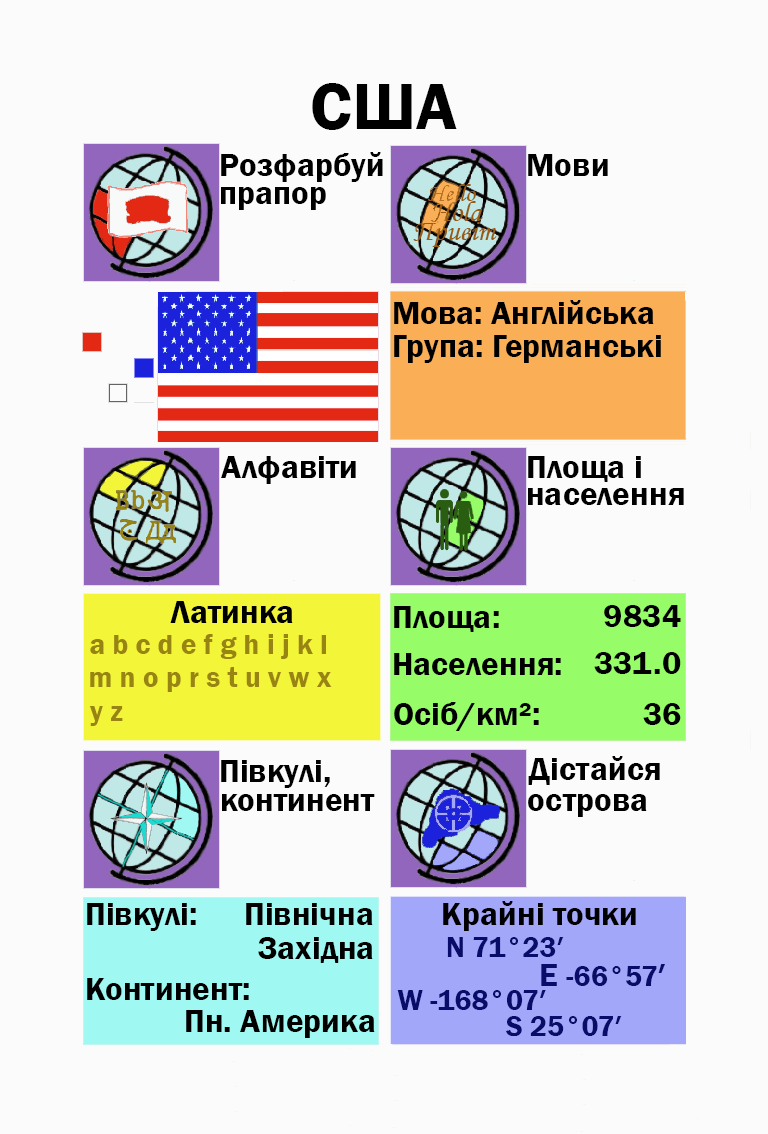
<style>
.page{position:relative;width:768px;height:1134px;background:#fbfbfb}
.page>*{position:absolute;margin:0}
.t1{font:66.7px "FranklinGothic-Demi";color:#000000}
.t2{font:33.3px "FranklinGothic-Demi";color:#000000}
.t3{font:33.3px "FranklinGothic-Demi";color:#000003}
.t4{font:29.2px "FranklinGothic-Demi";color:#988413}
.t5{font:29.2px "FranklinGothic-Demi";color:#090c69}
.t6{font:33.3px "FranklinGothic-Demi";color:#090c69}
</style>
<div class="page">
<p class="t1" style="left:312px;top:83px;width:145px;height:47px">США</p>
<p class="t2" style="left:221px;top:152px;width:162px;height:30px">Розфарбуй</p>
<p class="t2" style="left:528px;top:154px;width:80px;height:22px">Мови</p>
<p class="t2" style="left:221px;top:187px;width:105px;height:23px">прапор</p>
<p class="t2" style="left:394px;top:300px;width:260px;height:24px">Мова: Англійська</p>
<p class="t2" style="left:394px;top:335px;width:267px;height:28px">Група: Германські</p>
<p class="t2" style="left:221px;top:456px;width:135px;height:28px">Алфавіти</p>
<p class="t2" style="left:528px;top:456px;width:113px;height:26px">Площа і</p>
<p class="t2" style="left:528px;top:488px;width:156px;height:17px">населення</p>
<p class="t2" style="left:170px;top:601px;width:123px;height:22px">Латинка</p>
<p class="t2" style="left:394px;top:606px;width:105px;height:26px">Площа:</p>
<p class="t3" style="left:604px;top:605px;width:77px;height:22px">9834</p>
<p class="t4" style="left:90px;top:634px;width:236px;height:25px">a b c d e f g h i j k l</p>
<p class="t2" style="left:394px;top:653px;width:167px;height:22px">Населення:</p>
<p class="t2" style="left:594px;top:652px;width:87px;height:22px">331.0</p>
<p class="t4" style="left:90px;top:667px;width:242px;height:25px">m n o p r s t u v w x</p>
<p class="t2" style="left:394px;top:702px;width:145px;height:29px">Осіб/км²:</p>
<p class="t4" style="left:89px;top:706px;width:34px;height:20px">y z</p>
<p class="t2" style="left:643px;top:703px;width:38px;height:22px">36</p>
<p class="t2" style="left:221px;top:760px;width:109px;height:28px">Півкулі,</p>
<p class="t2" style="left:528px;top:756px;width:132px;height:29px">Дістайся</p>
<p class="t2" style="left:222px;top:794px;width:153px;height:17px">континент</p>
<p class="t2" style="left:528px;top:794px;width:119px;height:23px">острова</p>
<p class="t2" style="left:87px;top:903px;width:109px;height:28px">Півкулі:</p>
<p class="t2" style="left:246px;top:903px;width:127px;height:22px">Північна</p>
<p class="t3" style="left:443px;top:901px;width:193px;height:30px">Крайні точки</p>
<p class="t2" style="left:258px;top:937px;width:115px;height:26px">Західна</p>
<p class="t5" style="left:447px;top:937px;width:117px;height:20px">N 71°23′</p>
<p class="t5" style="left:541px;top:964px;width:124px;height:22px"><span class="t6">E </span>-66°57<span class="t6">′</span></p>
<p class="t2" style="left:87px;top:978px;width:162px;height:22px">Континент:</p>
<p class="t5" style="left:397px;top:990px;width:149px;height:20px">W -168°07′</p>
<p class="t2" style="left:186px;top:1010px;width:189px;height:28px">Пн. Америка</p>
<p class="t5" style="left:506px;top:1016px;width:116px;height:21px">S 25°07′</p>
</div>
